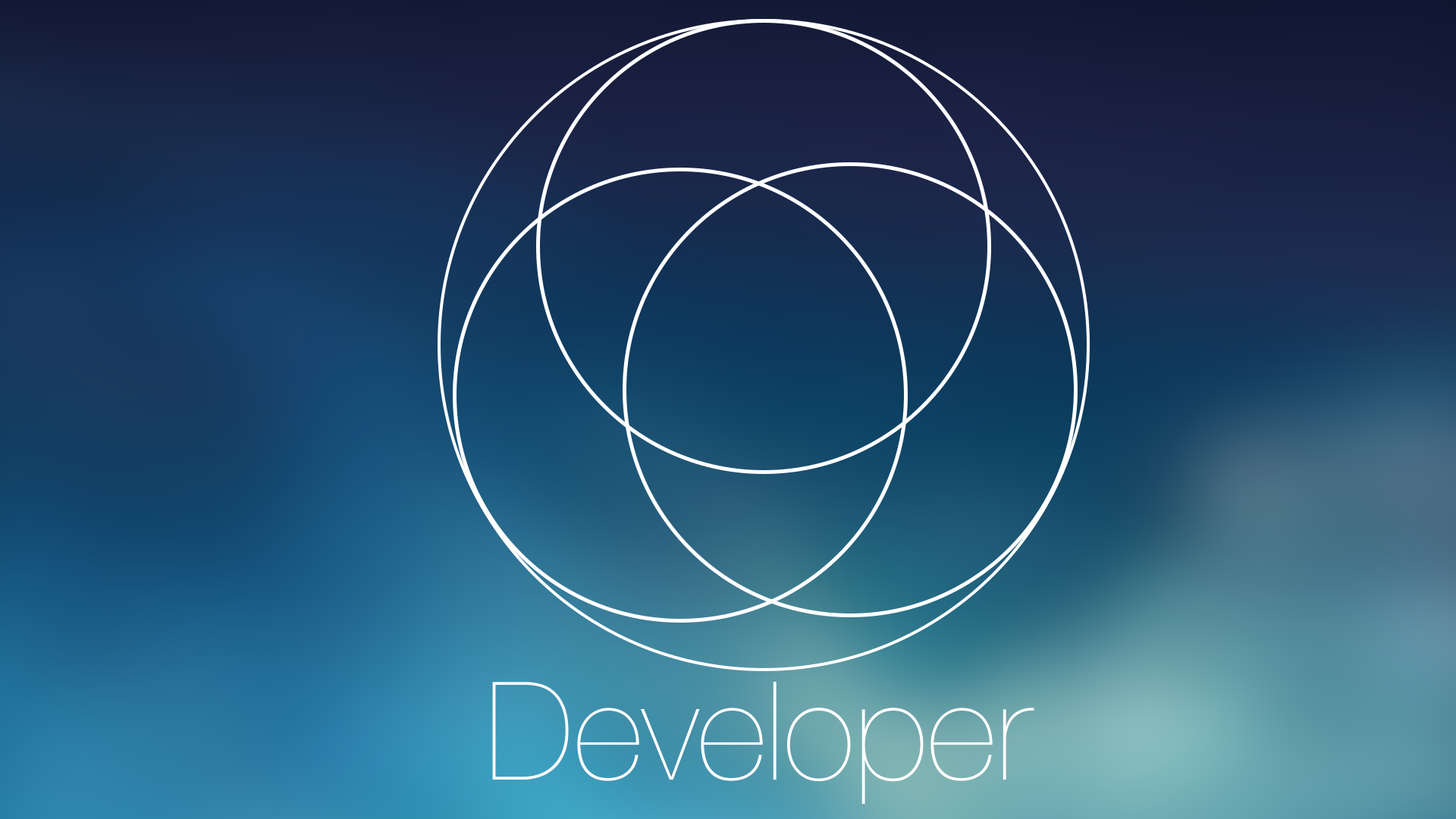
<style>
.page{position:relative;width:1456px;height:819px}
.page>*{position:absolute;margin:0}
.t1{font:136.5px "HelveticaNeue-UltraLight";color:#ffffff}
</style>
<div class="page">
<p class="t1" style="left:492px;top:682px;width:542px;height:122px">Developer</p>
</div>
